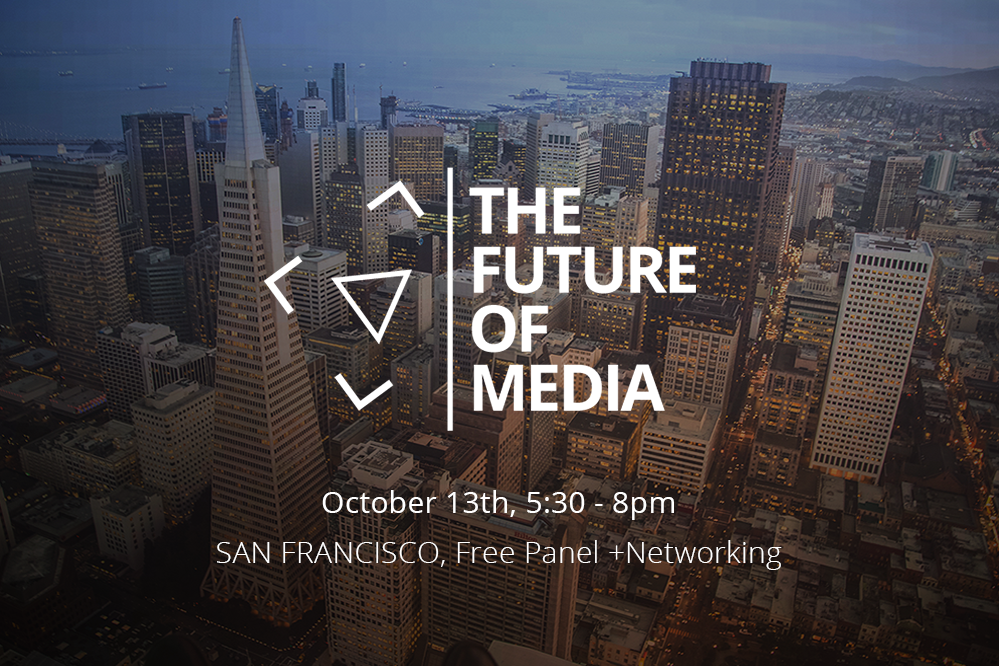
<style>
.page{position:relative;width:999px;height:666px}
.page>*{position:absolute;margin:0}
.t1{font:30px/50px "OpenSans-Light";letter-spacing:0.01em;color:#ffffff}
.t2{font:30px/50px "OpenSans";letter-spacing:0.01em;color:#ffffff}
</style>
<div class="page">
<p class="t1" style="left:217px;top:490px;width:565px;height:80px;text-align:center"><span class="t2">October 13th, 5:30 - 8pm<br></span>SAN FRANCISCO, Free Panel +Networking</p>
</div>
